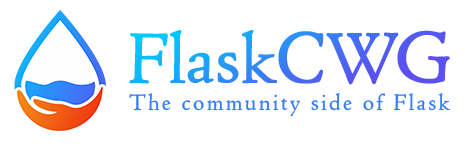
<style>
.page{position:relative;width:465px;height:144px;background:#ffffff}
.page>*{position:absolute;margin:0}
.t1{font:75.2px "URWCloisterW01-Regular";color:#466df5}
.t2{font:23.8px "URWCloisterW01-Regular";letter-spacing:0.1em;color:#397ef7}
</style>
<div class="page">
<p class="t1" style="left:129px;top:30px;width:321px;height:55px">FlaskCWG</p>
<p class="t2" style="left:129px;top:93px;width:321px;height:24px">The community side of Flask</p>
</div>
